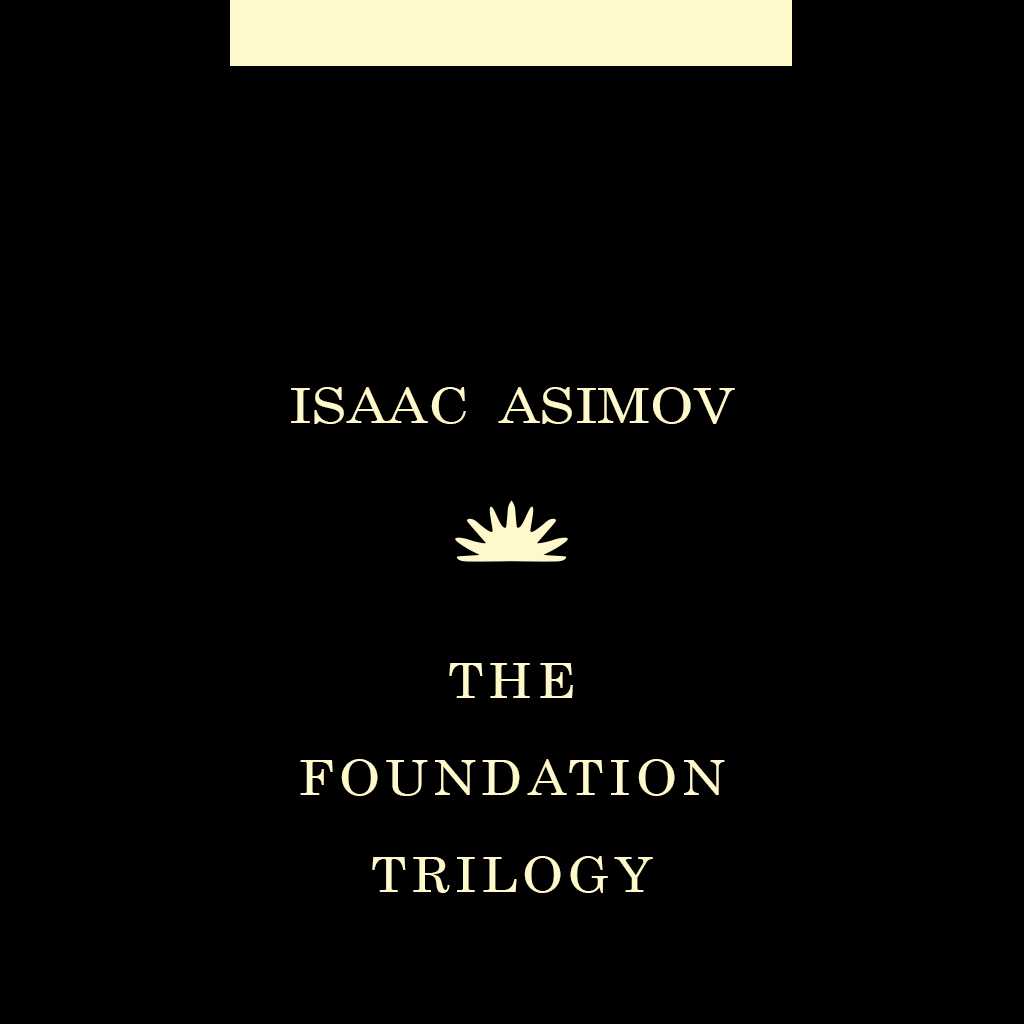
<style>
.page{position:relative;width:1024px;height:1024px;background:#000000}
.page>*{position:absolute;margin:0}
.t1{font:49.1px "Century";color:#fff8cb;scale:1.14 1}
.t2{font:48px/97.1px "Century";letter-spacing:0.1em;color:#fff8cb;scale:1.1 1}
</style>
<div class="page">
<p class="t1" style="left:291px;top:387px;width:444px;height:37px">ISAAC  ASIMOV</p>
<p class="t2" style="left:300px;top:663px;width:425px;height:230px;text-align:center">THE<br>FOUNDATION<br>TRILOGY</p>
</div>
